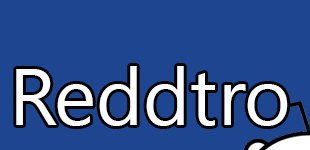
<style>
.page{position:relative;width:310px;height:150px;background:#1d4590}
.page>*{position:absolute;margin:0}
.t1{font:80px "SegoeUI";color:#ffffff}
</style>
<div class="page">
<p class="t1" style="left:16px;top:66px;width:272px;height:60px">Reddtro</p>
</div>
